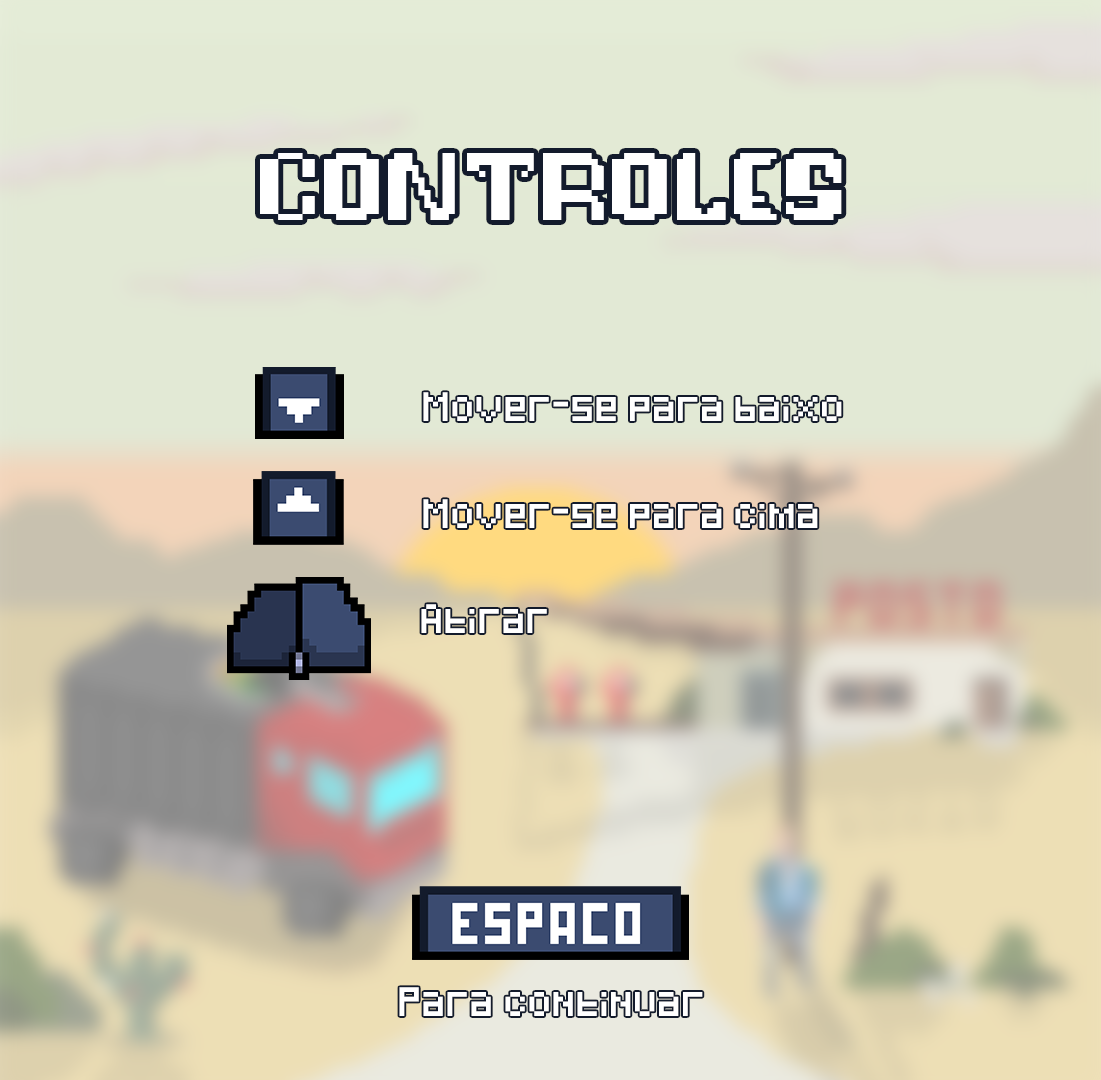
<style>
.page{position:relative;width:1101px;height:1080px}
.page>*{position:absolute;margin:0}
.t1{font:100px "Pixelfy";letter-spacing:0.05em;color:#ffffff}
.t2{font:24px "Pixeled";color:#ffffff}
</style>
<div class="page">
<p class="t1" style="left:260px;top:153px;width:582px;height:67px">CONTROLES</p>
<p class="t2" style="left:423px;top:392px;width:419px;height:29px">Mover-se para baixo</p>
<p class="t2" style="left:423px;top:499px;width:395px;height:29px">Mover-se para cima</p>
<p class="t2" style="left:421px;top:604px;width:126px;height:29px">Atirar</p>
<p class="t2" style="left:399px;top:987px;width:304px;height:29px">Para continuar</p>
</div>
